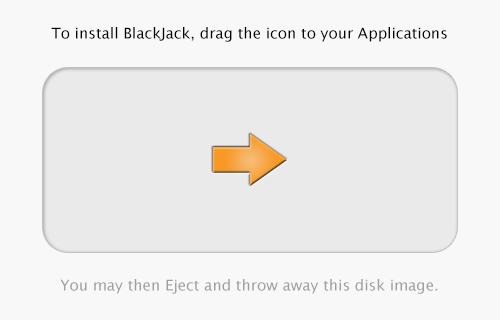
<style>
.page{position:relative;width:500px;height:320px;background:#f8f8f8}
.page>*{position:absolute;margin:0}
.t1{font:15px "LucidaGrande";color:#000000}
.t2{font:15px "LucidaGrande";color:#9f9f9f}
</style>
<div class="page">
<p class="t1" style="left:51px;top:27px;width:396px;height:15px">To install BlackJack, drag the icon to your Applications folder.</p>
<p class="t2" style="left:60px;top:279px;width:378px;height:15px">You may then Eject and throw away this disk image.</p>
</div>
